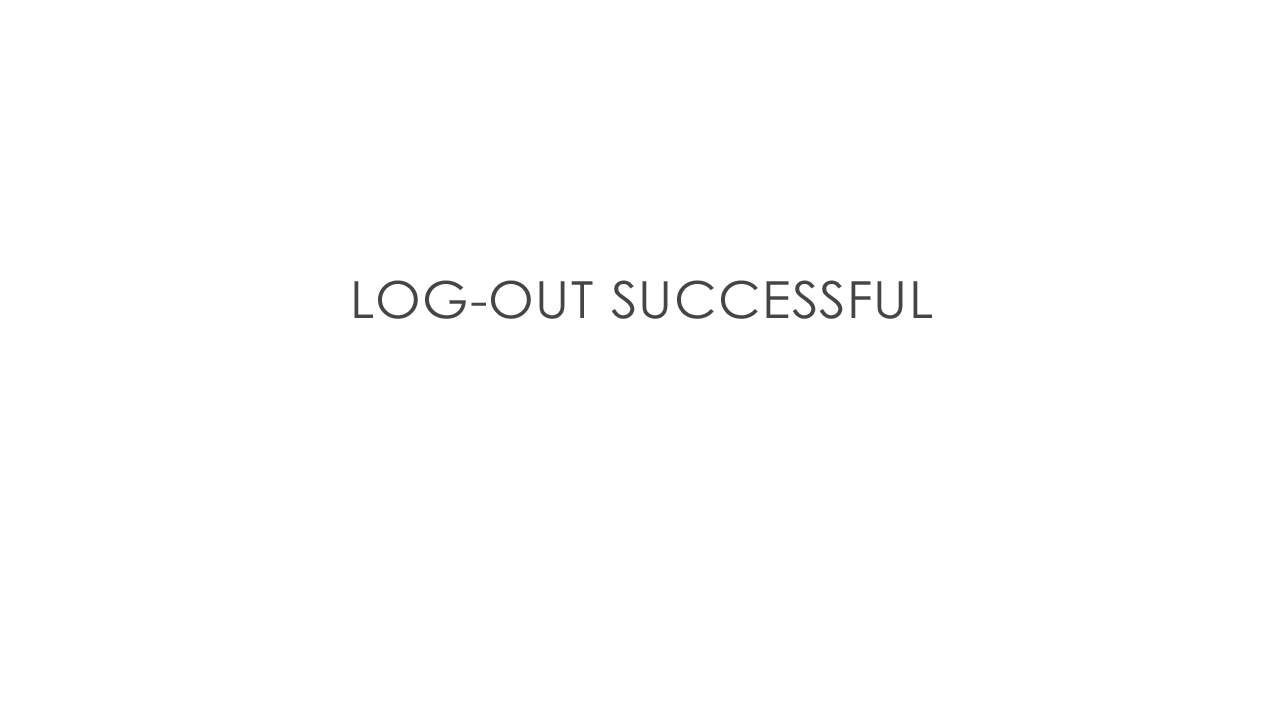
<style>
.page{position:relative;width:1287px;height:723px;background:#ffffff}
.page>*{position:absolute;margin:0}
.t1{font:51px "CenturyGothic";letter-spacing:0.02em;color:#454545;scale:1.04 1}
</style>
<div class="page">
<p class="t1" style="left:354px;top:280px;width:578px;height:39px">LOG-OUT SUCCESSFUL</p>
</div>
